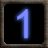
<style>
.page{position:relative;width:48px;height:48px;background:#000000}
.page>*{position:absolute;margin:0}
.t1{font:40px "ArialMT";color:#8089ff}
</style>
<div class="page">
<p class="t1" style="left:17px;top:9px;width:11px;height:30px">1</p>
</div>
